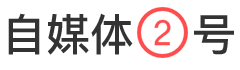
<style>
.page{position:relative;width:240px;height:70px;background:#ffffff}
.page>*{position:absolute;margin:0}
.t1{font:44px "PingFangTC-Medium";color:#333333}
</style>
<div class="page">
<p class="t1" style="left:8px;top:13px;width:226px;height:42px">自媒体    号</p>
</div>
